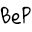
<style>
.page{position:relative;width:32px;height:32px;background:#ffffff}
.page>*{position:absolute;margin:0}
.t1{font:17.5px "GloriaHallelujah";color:#000000}
</style>
<div class="page">
<p class="t1" style="left:0px;top:6px;width:31px;height:18px">BeP</p>
</div>
